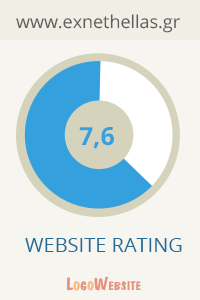
<style>
.page{position:relative;width:200px;height:300px;background:#f6f5f0}
.page>*{position:absolute;margin:0}
.t1{font:17.7px "OpenSans";color:#5f5d5c}
.t2{font:25px "OpenSans-Bold";color:#34a0de;text-transform:uppercase}
.t3{font:20px "OpenSans";color:#216d98;text-transform:uppercase}
.t4{font:18.1px "DomkratBold";color:#e5937e;font-variant:small-caps}
</style>
<div class="page">
<p class="t1" style="left:16px;top:14px;width:164px;height:19px">www.exnethellas.gr</p>
<p class="t2" style="left:79px;top:127px;width:35px;height:22px">7,6</p>
<p class="t3" style="left:25px;top:238px;width:157px;height:14px">Website Rating</p>
<p class="t4" style="left:67px;top:276px;width:74px;height:15px">LogoWebsite</p>
</div>
